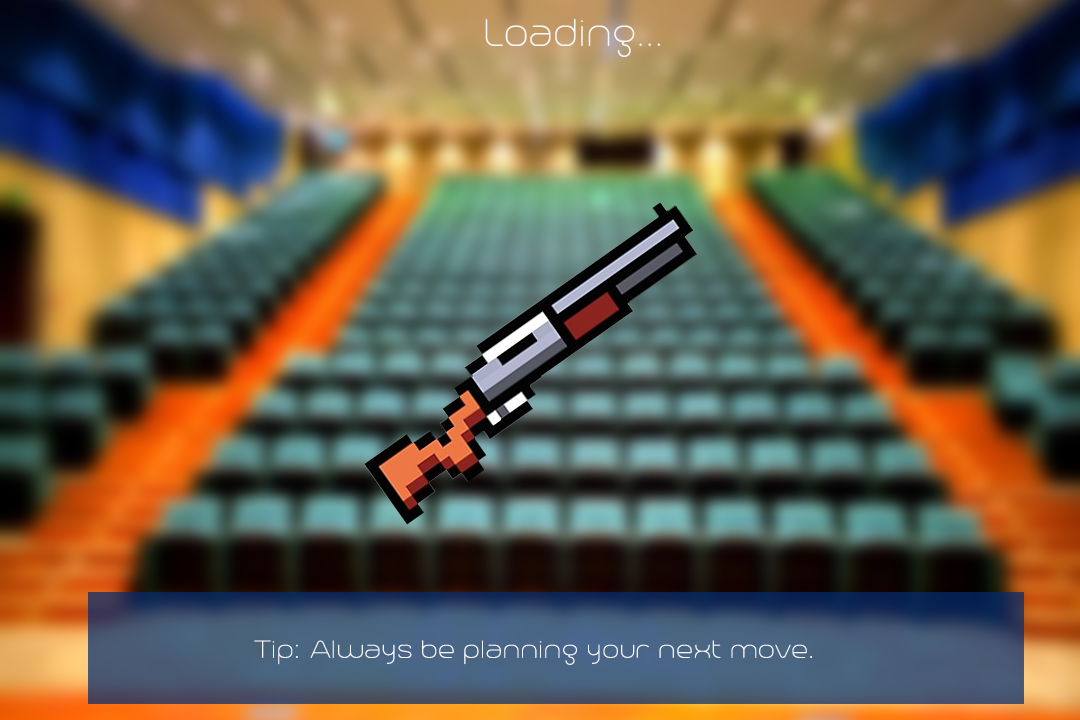
<style>
.page{position:relative;width:1080px;height:720px}
.page>*{position:absolute;margin:0}
.t1{font:48px "Trench-Thin";color:#f5f7f9}
.t2{font:30.8px "Trench-Thin";color:#f5f7f9;scale:1.09 1}
</style>
<div class="page">
<p class="t1" style="left:485px;top:18px;width:176px;height:39px">Loading...</p>
<p class="t2" style="left:254px;top:640px;width:558px;height:25px">Tip: Always be planning your next move.</p>
</div>
